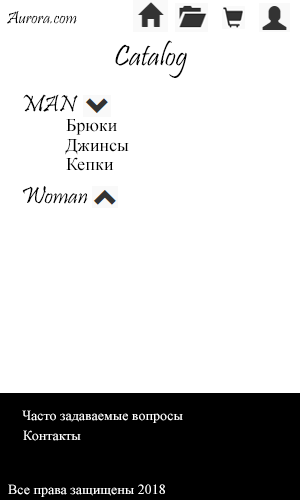
<style>
.page{position:relative;width:300px;height:500px;background:#ffffff}
.page>*{position:absolute;margin:0}
.t1{font:18px "Pristina-Regular";color:#000000}
.t2{font:30px "Pristina-Regular";color:#000000}
.t3{font:24px "Pristina-Regular";color:#000000}
.t4{font:18px "TimesNewRomanPSMT";color:#000000}
.t5{font:14px "TimesNewRomanPSMT";color:#ffffff}
</style>
<div class="page">
<p class="t1" style="left:7px;top:11px;width:70px;height:13px">Aurora.com</p>
<p class="t2" style="left:115px;top:40px;width:72px;height:38px">Catalog</p>
<p class="t3" style="left:23px;top:94px;width:55px;height:18px">MAN</p>
<p class="t4" style="left:66px;top:119px;width:51px;height:16px">Брюки</p>
<p class="t4" style="left:65px;top:139px;width:64px;height:16px">Джинсы</p>
<p class="t4" style="left:66px;top:157px;width:48px;height:14px">Кепки</p>
<p class="t3" style="left:22px;top:186px;width:66px;height:18px">Woman</p>
<p class="t5" style="left:22px;top:410px;width:161px;height:13px">Часто задаваемые вопросы</p>
<p class="t5" style="left:23px;top:430px;width:58px;height:11px">Контакты</p>
<p class="t5" style="left:8px;top:484px;width:157px;height:13px">Все права защищены 2018</p>
</div>
